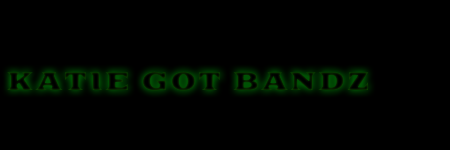
<style>
.page{position:relative;width:450px;height:150px;background:#000000}
.page>*{position:absolute;margin:0}
.t1{font:25.2px "Goblin";letter-spacing:0.1em;color:#000000}
.t2{font:25.2px "Goblin";letter-spacing:0.15em;color:#000000}
</style>
<div class="page">
<p class="t1" style="left:7px;top:71px;width:362px;height:20px"><span class="t2">K</span>ATIE GOT BANDZ</p>
</div>
